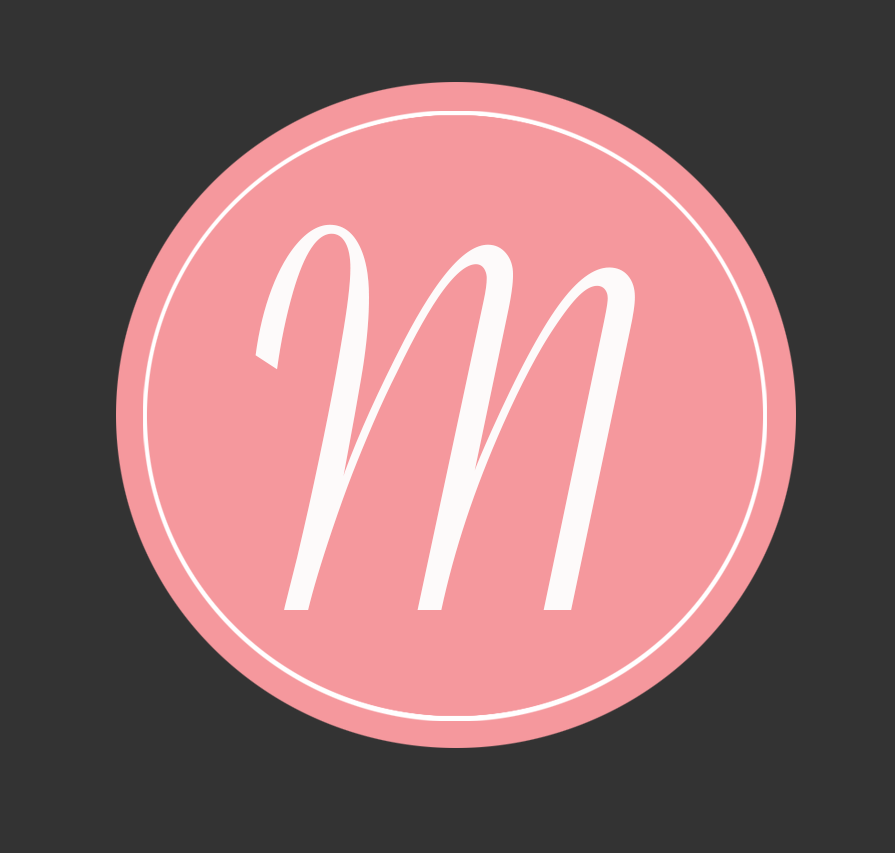
<style>
.page{position:relative;width:895px;height:853px;background:#333333}
.page>*{position:absolute;margin:0}
.t1{font:583.2px "SavoyeLetPlain";color:#fdfafa}
</style>
<div class="page">
<p class="t1" style="left:255px;top:224px;width:380px;height:386px">M</p>
</div>
